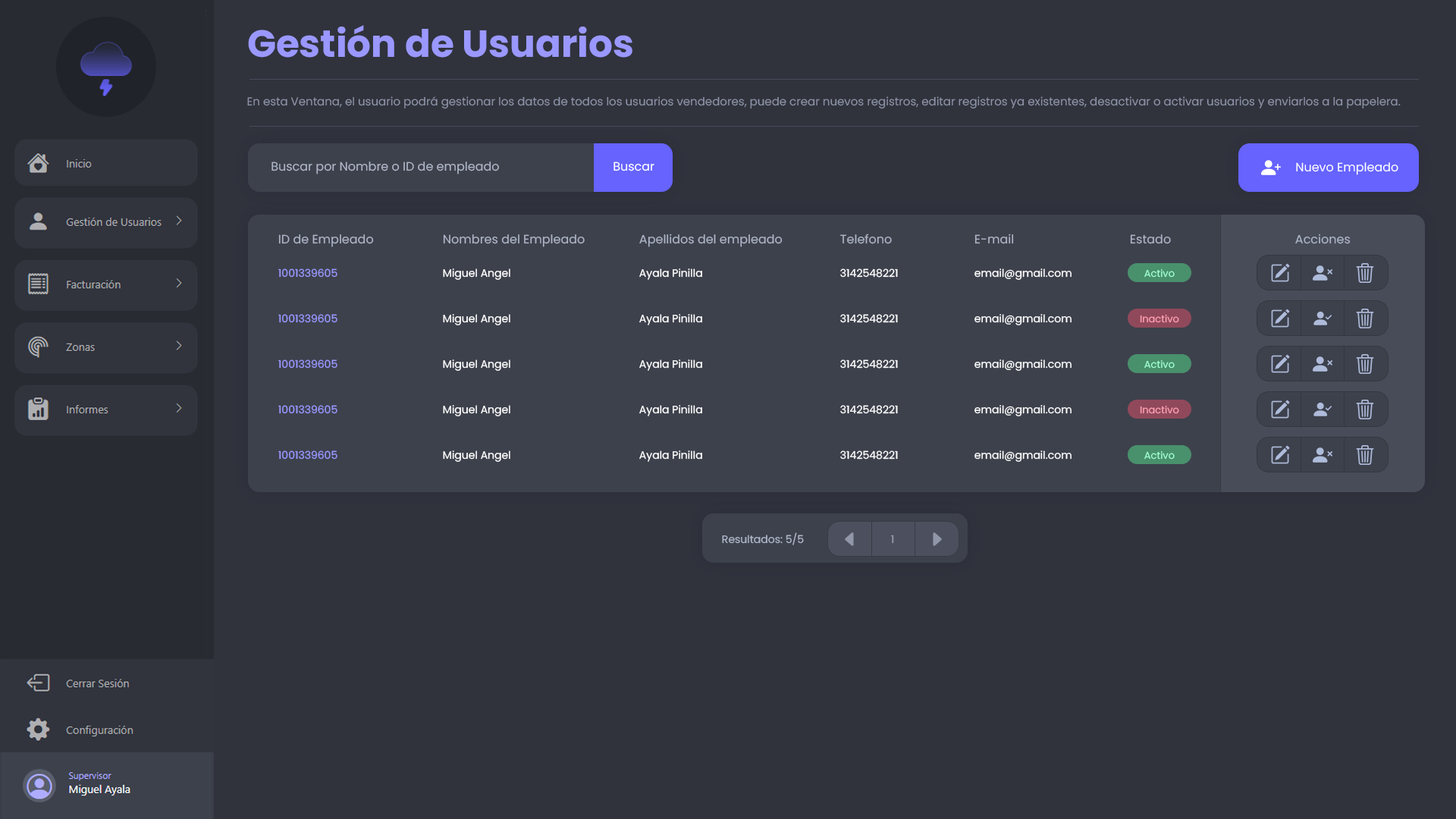
<style>
.page{position:relative;width:1456px;height:819px;background:#30333c}
.page>*{position:absolute;margin:0}
.t1{font:37.9px "Poppins-Bold";color:#9a98ff}
.t2{font:11.4px "Poppins-Regular";color:#8c92a6}
.t3{font:12.1px "Poppins-Regular";color:#aeb5c8}
.t4{font:12.1px "Poppins-Regular";color:#ffffff}
.t5{font:10.6px "Poppins-Regular";color:#9a98ff}
.t6{font:10.6px "Poppins-Regular";color:#ffffff}
.t7{font:9.9px "Poppins-Regular";color:#9fffcf}
.t8{font:9.9px "Poppins-Regular";color:#ff9fb3}
.t9{font:10.6px "Poppins-Regular";color:#aeb5c8}
.t10{font:10.6px "Poppins-Regular";color:#959bac}
</style>
<div class="page">
<p class="t1" style="left:248px;top:25px;width:384px;height:33px">Gestión de Usuarios</p>
<p class="t2" style="left:247px;top:96px;width:1154px;height:13px">En esta Ventana, el usuario podrá gestionar los datos de todos los usuarios vendedores, puede crear nuevos registros, editar registros ya existentes, desactivar o activar usuarios y enviarlos a la papelera.</p>
<p class="t3" style="left:271px;top:162px;width:228px;height:12px">Buscar por Nombre o ID de empleado</p>
<p class="t4" style="left:613px;top:162px;width:41px;height:9px">Buscar</p>
<p class="t4" style="left:1296px;top:162px;width:102px;height:13px">Nuevo Empleado</p>
<p class="t3" style="left:639px;top:234px;width:144px;height:13px">Apellidos del empleado</p>
<p class="t3" style="left:840px;top:234px;width:52px;height:10px">Telefono</p>
<p class="t3" style="left:974px;top:234px;width:40px;height:10px">E-mail</p>
<p class="t3" style="left:1295px;top:234px;width:56px;height:10px">Acciones</p>
<p class="t3" style="left:278px;top:234px;width:96px;height:13px">ID de Empleado</p>
<p class="t3" style="left:443px;top:234px;width:142px;height:13px">Nombres del Empleado</p>
<p class="t3" style="left:1130px;top:234px;width:41px;height:10px">Estado</p>
<p class="t5" style="left:278px;top:268px;width:59px;height:10px">1001339605</p>
<p class="t6" style="left:443px;top:268px;width:67px;height:12px">Miguel Angel</p>
<p class="t6" style="left:639px;top:268px;width:63px;height:12px">Ayala Pinilla</p>
<p class="t6" style="left:840px;top:268px;width:58px;height:10px">3142548221</p>
<p class="t6" style="left:974px;top:268px;width:98px;height:12px">email@gmail.com</p>
<p class="t7" style="left:1144px;top:269px;width:31px;height:9px">Activo</p>
<p class="t5" style="left:278px;top:314px;width:59px;height:9px">1001339605</p>
<p class="t6" style="left:443px;top:314px;width:67px;height:11px">Miguel Angel</p>
<p class="t6" style="left:639px;top:314px;width:63px;height:11px">Ayala Pinilla</p>
<p class="t6" style="left:840px;top:314px;width:58px;height:9px">3142548221</p>
<p class="t6" style="left:974px;top:314px;width:98px;height:11px">email@gmail.com</p>
<p class="t8" style="left:1140px;top:315px;width:39px;height:8px">Inactivo</p>
<p class="t5" style="left:278px;top:359px;width:59px;height:10px">1001339605</p>
<p class="t6" style="left:443px;top:359px;width:67px;height:12px">Miguel Angel</p>
<p class="t6" style="left:639px;top:359px;width:63px;height:12px">Ayala Pinilla</p>
<p class="t6" style="left:840px;top:359px;width:58px;height:10px">3142548221</p>
<p class="t6" style="left:974px;top:359px;width:98px;height:12px">email@gmail.com</p>
<p class="t7" style="left:1144px;top:360px;width:31px;height:9px">Activo</p>
<p class="t5" style="left:278px;top:405px;width:59px;height:9px">1001339605</p>
<p class="t6" style="left:443px;top:405px;width:67px;height:11px">Miguel Angel</p>
<p class="t6" style="left:639px;top:405px;width:63px;height:11px">Ayala Pinilla</p>
<p class="t6" style="left:840px;top:405px;width:58px;height:9px">3142548221</p>
<p class="t6" style="left:974px;top:405px;width:98px;height:11px">email@gmail.com</p>
<p class="t8" style="left:1140px;top:406px;width:39px;height:8px">Inactivo</p>
<p class="t5" style="left:278px;top:450px;width:59px;height:10px">1001339605</p>
<p class="t6" style="left:443px;top:450px;width:67px;height:12px">Miguel Angel</p>
<p class="t6" style="left:639px;top:450px;width:63px;height:12px">Ayala Pinilla</p>
<p class="t6" style="left:840px;top:450px;width:58px;height:10px">3142548221</p>
<p class="t6" style="left:974px;top:450px;width:98px;height:12px">email@gmail.com</p>
<p class="t7" style="left:1144px;top:451px;width:31px;height:9px">Activo</p>
<p class="t9" style="left:722px;top:532px;width:82px;height:13px">Resultados: 5/5</p>
<p class="t10" style="left:891px;top:535px;width:3px;height:9px">1</p>
</div>
